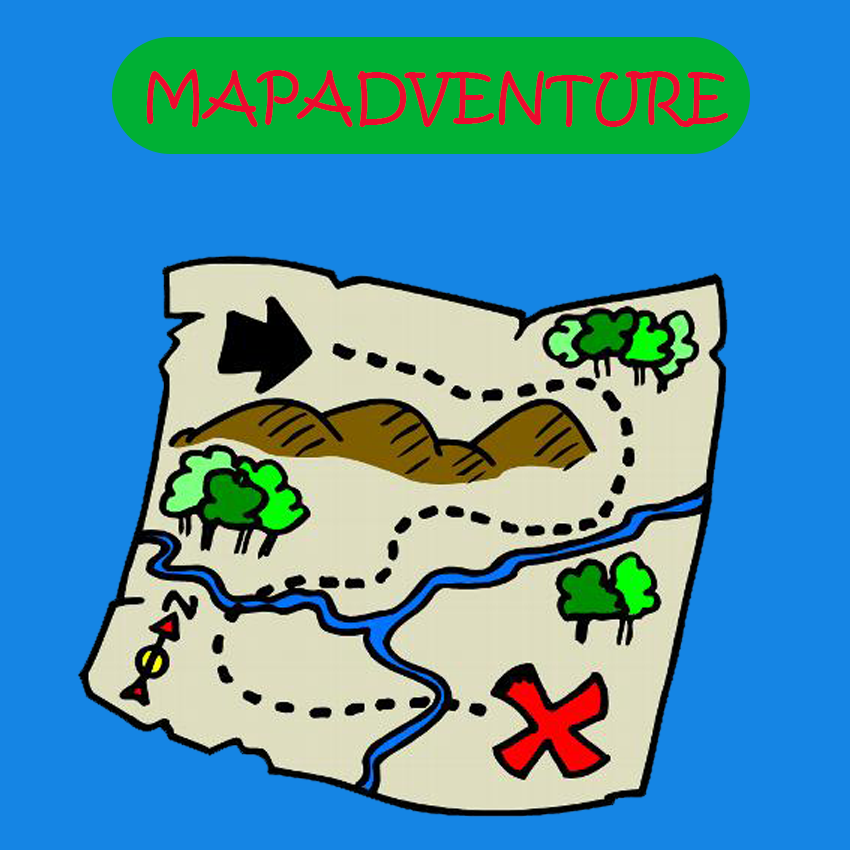
<style>
.page{position:relative;width:850px;height:850px;background:#1585e4}
.page>*{position:absolute;margin:0}
.t1{font:60px "KristenITC-Regular";color:#ec0a2f}
</style>
<div class="page">
<p class="t1" style="left:146px;top:69px;width:582px;height:58px">MAPADVENTURE</p>
</div>
